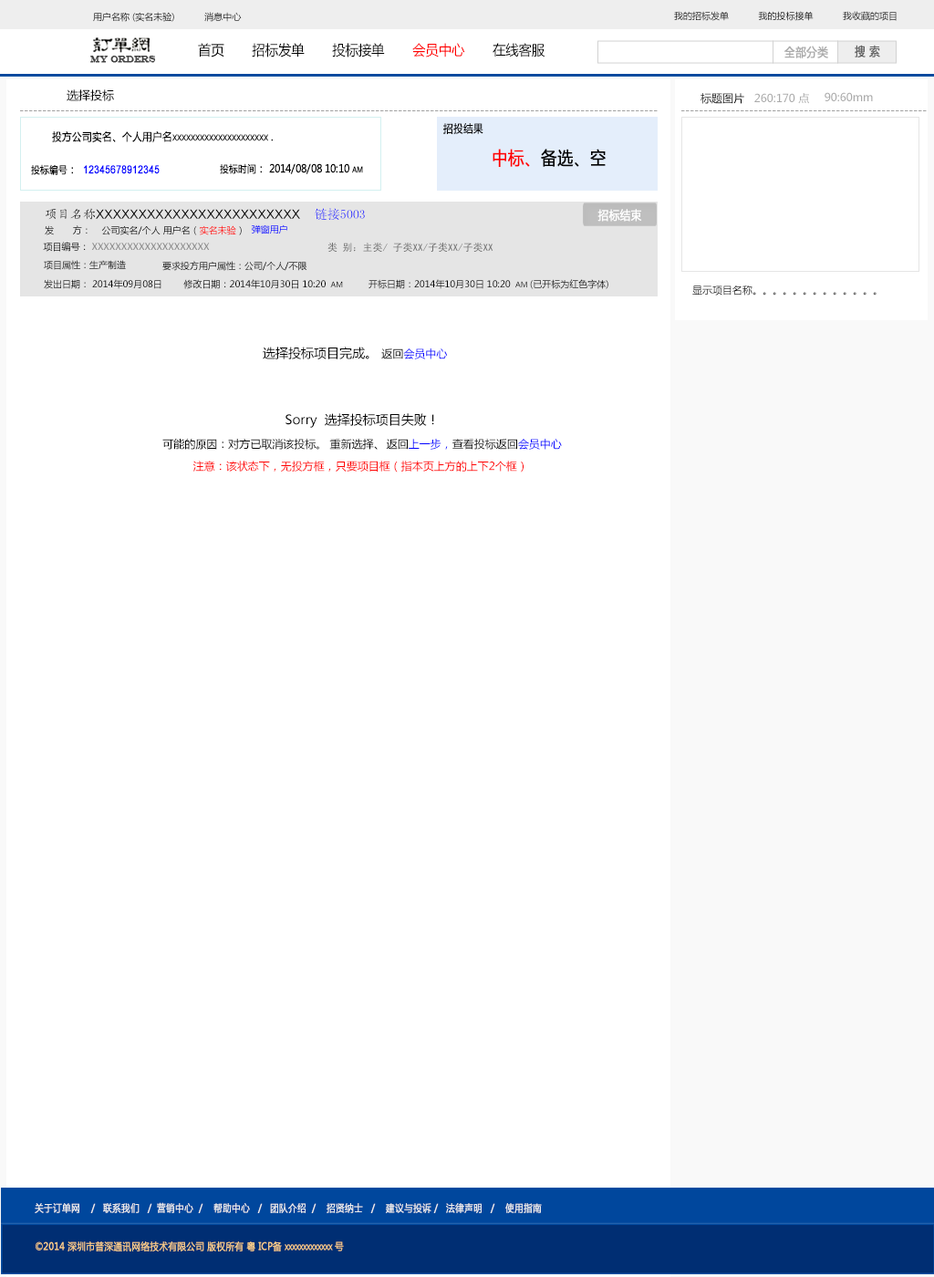
<style>
.page{position:relative;width:934px;height:1277px;background:#ffffff}
.page>*{position:absolute;margin:0}
.t1{font:9.1px "MicrosoftYaHei";color:#000000}
.t2{font:14px "MicrosoftYaHei";color:#000000;font-variant:small-caps;scale:0.94 1}
.t3{font:14px "MicrosoftYaHei";color:#ff0000;font-variant:small-caps;scale:0.94 1}
.t4{font:12px "MicrosoftYaHei";color:#aaaaaa;font-variant:small-caps;font-weight:bold;scale:0.86 1}
.t5{font:12px "MicrosoftYaHei";color:#626262;font-variant:small-caps;font-weight:bold;scale:0.86 1}
.t6{font:9px "EngraversMT";color:#434343;font-variant:small-caps;font-weight:bold;scale:0.86 1}
.t7{font:11.9px "MicrosoftYaHei";color:#000000}
.t8{font:10.9px "MicrosoftYaHei";color:#000000}
.t9{font:10.9px "MicrosoftYaHei";color:#aaaaaa}
.t10{font:10.9px "MicrosoftYaHei";color:#a0a0a0}
.t11{font:11px "MicrosoftYaHei";color:#000000;font-variant:small-caps;font-weight:bold;scale:0.86 1}
.t12{font:10px "MicrosoftYaHei";color:#000000;font-variant:small-caps;font-weight:bold;scale:0.86 1}
.t13{font:18.1px "MicrosoftYaHei";color:#000000;font-variant:small-caps;font-weight:bold;scale:0.86 1}
.t14{font:18.1px "MicrosoftYaHei";color:#ff0000;font-variant:small-caps;font-weight:bold;scale:0.86 1}
.t15{font:11px "ArialMT";color:#0000ff;font-variant:small-caps;font-weight:bold;scale:0.86 1}
.t16{font:12.8px "ArialMT";color:#000000}
.t17{font:10.9px "SimHei";color:#000000}
.t18{font:12.8px "KaiTi_GB2312";color:#000000}
.t19{font:12.8px "SimSun";color:#000000}
.t20{font:12px "MicrosoftYaHei";color:#ffffff;font-variant:small-caps;font-weight:bold;scale:0.86 1}
.t21{font:9.1px "MicrosoftYaHei"}
.t22{font:9.1px "MicrosoftYaHei";color:#898989}
.t23{font:13.7px "SimHei";color:#000000}
.t24{font:10px "SimHei";color:#707070}
.t25{font:7.3px "MicrosoftYaHei";color:#000000}
.t26{font:10px "MicrosoftYaHei";color:#000000}
.t27{font:12.8px "MicrosoftYaHei";color:#000000}
.t28{font:10.9px "MicrosoftYaHei";color:#0000ff}
.t29{font:10.9px/23.7px "MicrosoftYaHei";color:#ff0000}
.t30{font:12.8px/23.7px "MicrosoftYaHei";color:#000000}
.t31{font:10.9px/23.7px "MicrosoftYaHei";color:#000000}
.t32{font:10.9px/23.7px "MicrosoftYaHei";color:#0000ff}
.t33{font:10px "MicrosoftYaHei";color:#eeeeee;font-variant:small-caps;font-weight:bold;scale:0.86 1}
.t34{font:14px "STXihei";color:#eeeeee;font-variant:small-caps;font-weight:bold;scale:0.86 1}
.t35{font:10px "MicrosoftYaHei";color:#facd89;font-variant:small-caps;font-weight:bold;scale:0.87 1}
.t36{font:10px "MicrosoftYaHei";color:#eeeeee;font-variant:small-caps;font-weight:bold;scale:0.87 1}
</style>
<div class="page">
<p class="t1" style="left:93px;top:12px;width:149px;height:10px">用户名称 (实名未验)           消息中心</p>
<p class="t1" style="left:674px;top:11px;width:223px;height:10px">我的招标发单           我的投标接单           我收藏的项目</p>
<p class="t2" style="left:198px;top:43px;width:347px;height:14px">首页       招标发单       投标接单       <span class="t3">会员中心</span>       在线客服</p>
<p class="t4" style="left:784px;top:46px;width:44px;height:12px">全部分类</p>
<p class="t5" style="left:855px;top:45px;width:25px;height:12px">搜 索</p>
<p class="t6" style="left:90px;top:56px;width:66px;height:7px">MY ORDERS</p>
<p class="t7" style="left:67px;top:89px;width:47px;height:12px">选择投标</p>
<p class="t8" style="left:700px;top:93px;width:44px;height:11px">标题图片</p>
<p class="t9" style="left:754px;top:93px;width:55px;height:11px">260:170 点</p>
<p class="t9" style="left:824px;top:92px;width:49px;height:9px">90:60mm</p>
<p class="t10" style="left:20px;top:110px;width:638px;height:1px">--------------------------------------------------------------------------------------------------------------------------------------------</p>
<p class="t10" style="left:681px;top:110px;width:246px;height:1px">------------------------------------------------------</p>
<p class="t11" style="left:443px;top:123px;width:40px;height:11px">招投结果</p>
<p class="t11" style="left:52px;top:131px;width:221px;height:11px">投方公司实名、个人用户名xxxxxxxxxxxxxxxxxxxxx <span class="t12">.</span></p>
<p class="t13" style="left:492px;top:149px;width:114px;height:18px"><span class="t14">中标、</span>备选、空</p>
<p class="t15" style="left:31px;top:164px;width:129px;height:11px"><span class="t12">投标编号</span><span class="t11">：  </span>12345678912345</p>
<p class="t11" style="left:220px;top:163px;width:143px;height:11px"><span class="t12">投标时间</span>： 2014/08/08 10:10 am</p>
<p class="t16" style="left:46px;top:208px;width:319px;height:12px"><span class="t17"><br></span><span class="t18">项目名称</span>XXXXXXXXXXXXXXXXXXXXXXXX    <span class="t19">链接5003</span></p>
<p class="t20" style="left:597px;top:209px;width:45px;height:13px">招标结束</p>
<p class="t21" style="left:45px;top:225px;width:197px;height:10px">发       方：    公司实名/个人 用户名（实名未验）</p>
<p class="t21" style="left:252px;top:224px;width:35px;height:10px">弹窗用户</p>
<p class="t22" style="left:43px;top:242px;width:167px;height:10px"><span class="t23"> </span><span class="t1">项目编号： </span>XXXXXXXXXXXXXXXXXXXX</p>
<p class="t24" style="left:327px;top:243px;width:166px;height:9px">类 别：主类/ 子类XX/子类XX/子类XX</p>
<p class="t21" style="left:44px;top:260px;width:82px;height:10px">项目属性：生产制造</p>
<p class="t1" style="left:162px;top:261px;width:145px;height:10px">要求投方用户属性：公司/个人/不限</p>
<p class="t1" style="left:44px;top:279px;width:299px;height:10px">发出日期： 2014年09月08日        修改日期：2014年10月30日 10:20 <span class="t25"> AM</span></p>
<p class="t1" style="left:368px;top:279px;width:240px;height:10px">开标日期：2014年10月30日 10:20 <span class="t25"> AM </span>(已开标为红色字体)</p>
<p class="t26" style="left:692px;top:285px;width:184px;height:10px">显示项目名称。。。。。。。。。。。。。</p>
<p class="t27" style="left:263px;top:347px;width:185px;height:12px">选择投标项目完成。 <span class="t8">返回</span><span class="t28">会员中心</span></p>
<p class="t29" style="left:162px;top:413px;width:400px;height:59px;text-align:center"><span class="t30">Sorry  选择投标项目失败！<br></span><span class="t31"> 可能的原因：对方已取消该投标。 重新选择</span><span class="t30">、</span><span class="t31">返回</span><span class="t32">上一步，</span><span class="t31">查看投标返回</span><span class="t32">会员中心 <br></span>注意：该状态下，无投方框，只要项目框（指本页上方的上下2个框）</p>
<p class="t33" style="left:35px;top:1202px;width:507px;height:11px"><span class="t34"><br><br></span>关于订单网    /   联系我们   /  营销中心  /    帮助中心   /   团队介绍  /    招贤纳士   /    建议与投诉 /   法律声明   /    使用指南</p>
<p class="t35" style="left:36px;top:1241px;width:308px;height:10px"><span class="t36"> </span>©2014 深圳市普深通讯网络技术有限公司 版权所有 粤 ICP备 xxxxxxxxxxxxx 号</p>
</div>
